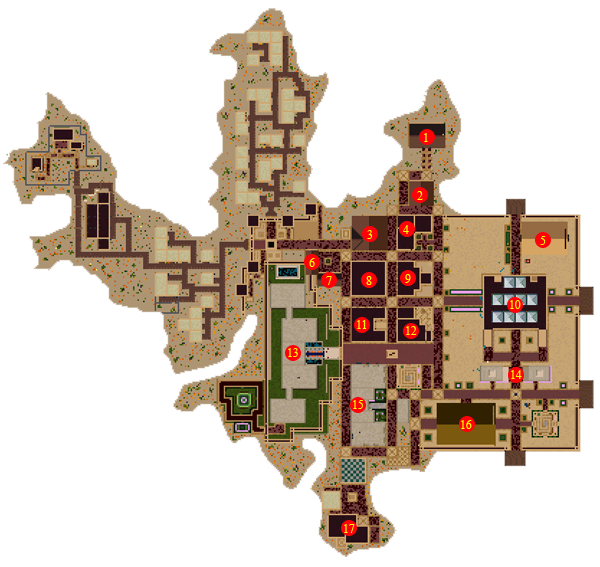
<style>
.page{position:relative;width:600px;height:567px;background:#ffffff}
.page>*{position:absolute;margin:0}
.t1{font:20px "TimesNewRomanPSMT";color:#fbfe02}
</style>
<div class="page">
<p class="t1" style="left:424px;top:133px;width:4px;height:9px">1</p>
<p class="t1" style="left:417px;top:191px;width:6px;height:9px">2</p>
<p class="t1" style="left:367px;top:230px;width:6px;height:9px">3</p>
<p class="t1" style="left:403px;top:225px;width:6px;height:9px">4</p>
<p class="t1" style="left:540px;top:236px;width:6px;height:9px">5</p>
<p class="t1" style="left:309px;top:258px;width:6px;height:9px">6</p>
<p class="t1" style="left:326px;top:276px;width:6px;height:9px">7</p>
<p class="t1" style="left:366px;top:276px;width:6px;height:9px">8</p>
<p class="t1" style="left:405px;top:274px;width:6px;height:9px">9</p>
<p class="t1" style="left:510px;top:300px;width:11px;height:9px">10</p>
<p class="t1" style="left:357px;top:320px;width:10px;height:9px">11</p>
<p class="t1" style="left:406px;top:326px;width:11px;height:9px">12</p>
<p class="t1" style="left:288px;top:348px;width:10px;height:9px">13</p>
<p class="t1" style="left:511px;top:370px;width:11px;height:9px">14</p>
<p class="t1" style="left:353px;top:400px;width:10px;height:9px">15</p>
<p class="t1" style="left:461px;top:420px;width:11px;height:9px">16</p>
<p class="t1" style="left:344px;top:524px;width:11px;height:9px">17</p>
</div>
